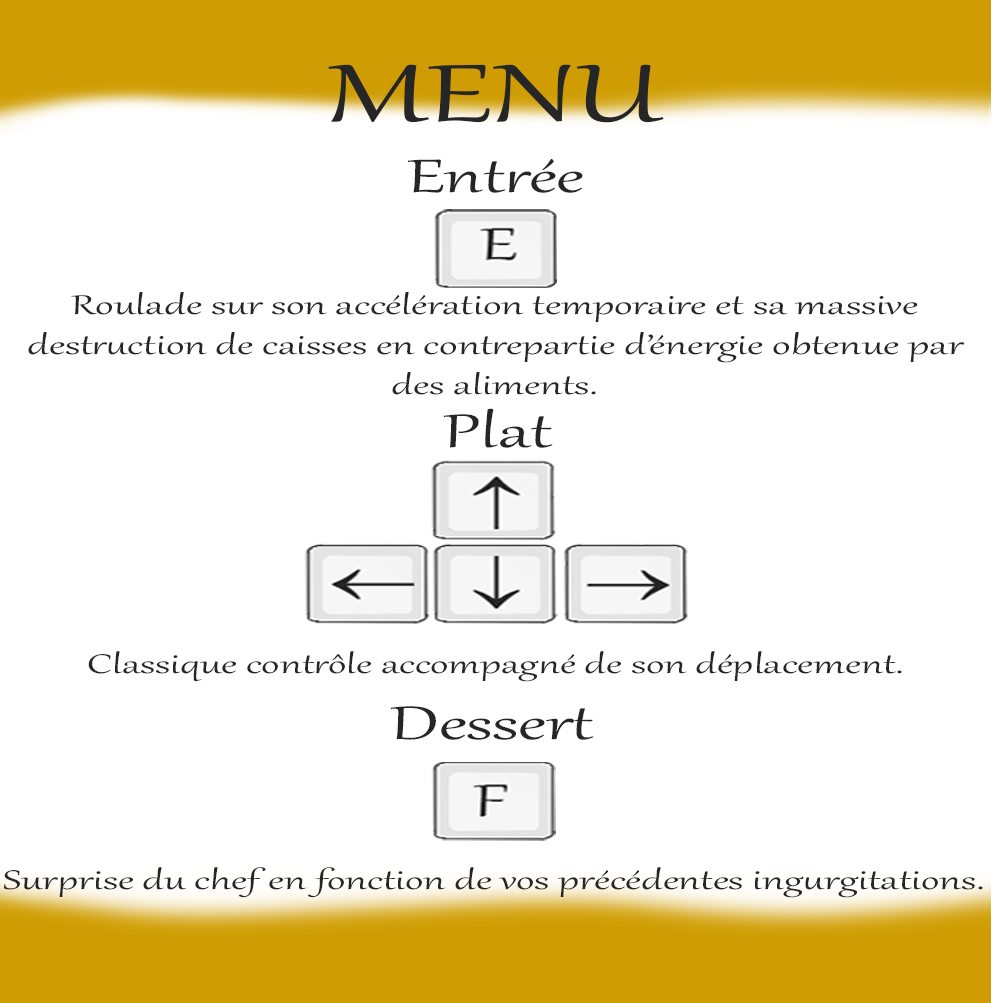
<style>
.page{position:relative;width:993px;height:1003px;background:#ffffff}
.page>*{position:absolute;margin:0}
.t1{font:100px "Gabriola";color:#262626;scale:1.55 1}
.t2{font:57.9px "Gabriola";color:#262626;scale:1.55 1}
.t3{font:33.3px "Gabriola";color:#262626;scale:1.55 1}
.t4{font:33.1px "Gabriola";color:#262626;scale:1.55 1}
</style>
<div class="page">
<p class="t1" style="left:328px;top:64px;width:336px;height:59px">MENU</p>
<p class="t2" style="left:408px;top:159px;width:175px;height:34px">Entrée</p>
<p class="t3" style="left:28px;top:292px;width:937px;height:103px;text-align:center">Roulade sur son accélération temporaire et sa massive destruction de caisses en contrepartie d’énergie obtenue par des aliments.</p>
<p class="t2" style="left:443px;top:408px;width:110px;height:40px">Plat</p>
<p class="t4" style="left:88px;top:651px;width:814px;height:31px">Classique contrôle accompagné de son déplacement.</p>
<p class="t2" style="left:390px;top:706px;width:204px;height:34px">Dessert</p>
<p class="t4" style="left:4px;top:867px;width:979px;height:31px">Surprise du chef en fonction de vos précédentes ingurgitations.</p>
</div>
